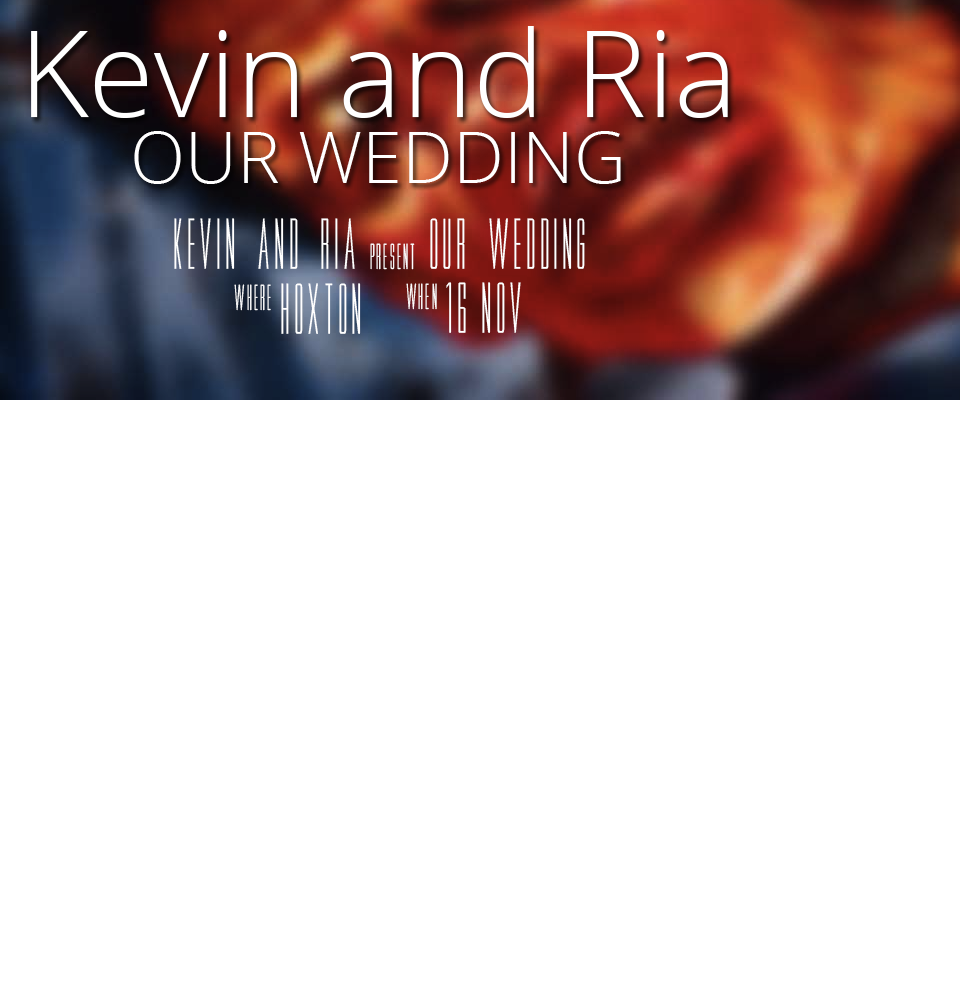
<style>
.page{position:relative;width:960px;height:1000px;background:#ffffff}
.page>*{position:absolute;margin:0}
.t1{font:120px "OpenSans-Light";color:#ffffff}
.t2{font:72px "OpenSans-Light";color:#ffffff}
.t3{font:72px "MovieLetters";color:#ffffff}
.t4{font:36px "MovieLetters";color:#ffffff}
</style>
<div class="page">
<p class="t1" style="left:31px;top:26px;width:697px;height:158px;text-align:center">Kevin and Ria<br><span class="t2">OUR WEDDING</span></p>
<p class="t3" style="left:174px;top:218px;width:411px;height:52px">Kevin and ria <span class="t4">present </span>our wedding</p>
<p class="t3" style="left:234px;top:283px;width:127px;height:51px"><span class="t4">WHERE </span>HOXTON</p>
<p class="t3" style="left:406px;top:282px;width:115px;height:51px"><span class="t4">WHEn </span>16 Nov</p>
</div>
